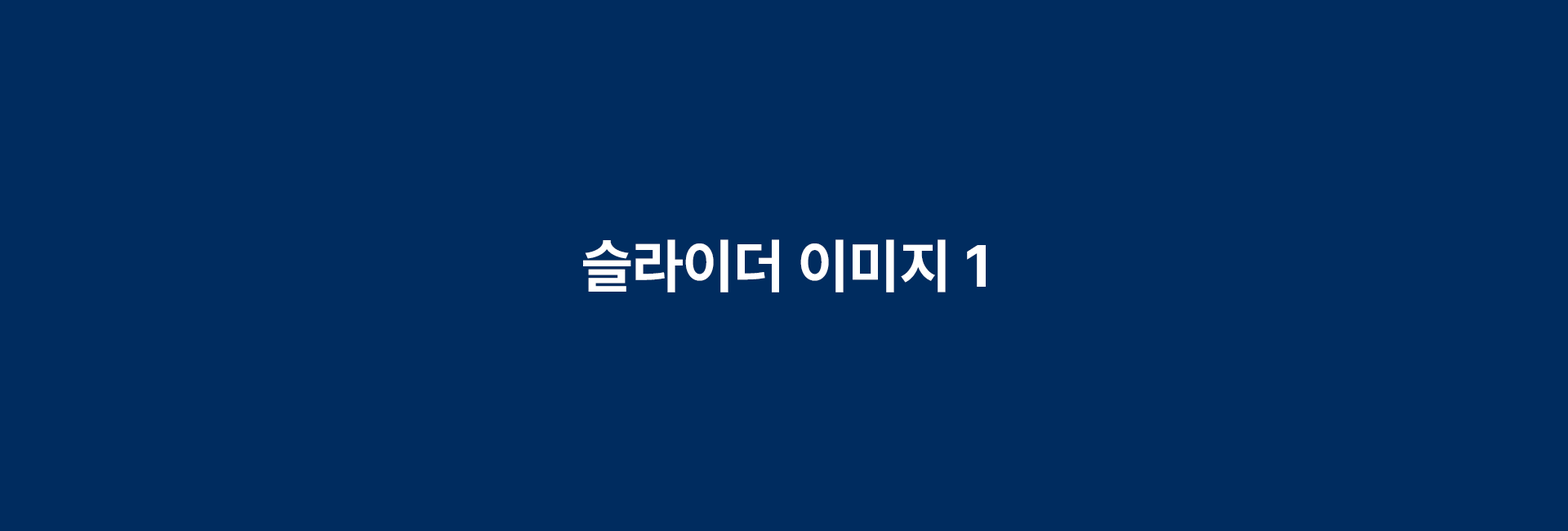
<style>
.page{position:relative;width:1568px;height:531px;background:#002c5f}
.page>*{position:absolute;margin:0}
.t1{font:58.8px "PretendardVariable-Bold";color:#ffffff}
</style>
<div class="page">
<p class="t1" style="left:583px;top:239px;width:403px;height:53px">슬라이더 이미지 1</p>
</div>
